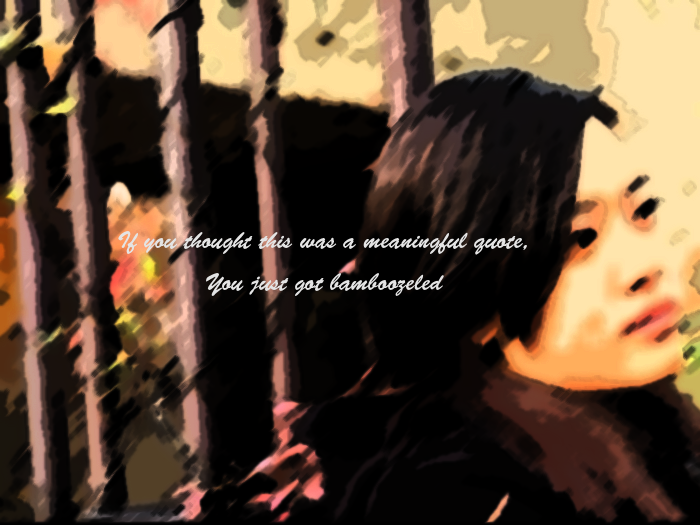
<style>
.page{position:relative;width:700px;height:525px}
.page>*{position:absolute;margin:0}
.t1{font:24px "BrushScriptStd";color:#e4e4e4}
</style>
<div class="page">
<p class="t1" style="left:118px;top:231px;width:409px;height:65px;text-align:center">If you thought this was a meaningful quote,<br>You just got bamboozeled</p>
</div>
